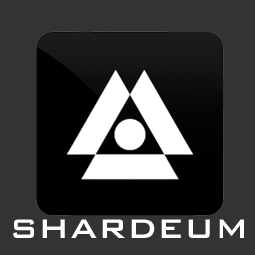
<style>
.page{position:relative;width:255px;height:255px;background:#333333}
.page>*{position:absolute;margin:0}
.t1{font:36px "BankGothicBT-Medium";color:#ffffff}
</style>
<div class="page">
<p class="t1" style="left:13px;top:219px;width:231px;height:19px">SHARDEUM</p>
</div>
